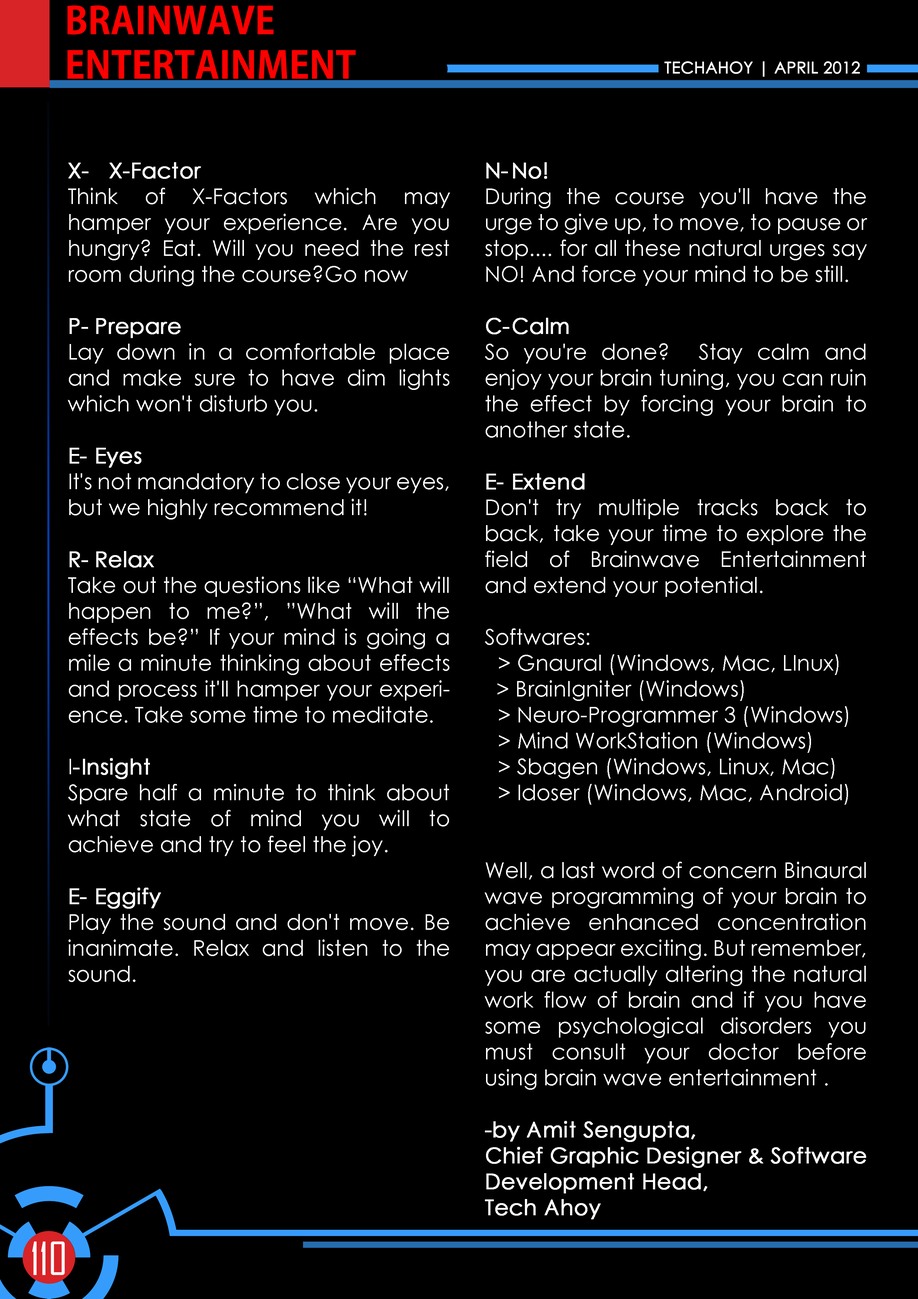
<style>
.page{position:relative;width:918px;height:1299px;background:#000000}
.page>*{position:absolute;margin:0}
.t1{font:37px "AdobeGothicStd-Bold";color:#ff0000;text-transform:uppercase}
.t2{font:16px "CenturyGothic";color:#ffffff;text-transform:uppercase;font-weight:bold}
.t3{font:21.6px "CenturyGothic";color:#fdfdfd}
.t4{font:21.6px "CenturyGothic";color:#fdfdfd;font-weight:bold}
.t5{font:43.7px "AgencyFB-Reg";color:#ffffff;text-transform:uppercase}
</style>
<div class="page">
<p class="t1" style="left:67px;top:5px;width:289px;height:74px">BRAINWAVE <br>eNTERTAINMENT</p>
<p class="t2" style="left:665px;top:61px;width:195px;height:16px">techahoy | APRIL 2012</p>
<p class="t3" style="left:68px;top:162px;width:382px;height:820px;text-align:justify"><span class="t4">X-   X-Factor<br></span>Think of X-Factors which may hamper your experience. Are you hungry? Eat. Will you need the rest room during the course?Go now<br><br><span class="t4">P- Prepare<br></span>Lay down in a comfortable place and make sure to have dim lights which won't disturb you.<br><br><span class="t4">E- Eyes<br></span>It's not mandatory to close your eyes, but we highly recommend it!<br><br><span class="t4">R- Relax<br></span>Take out the questions like “What will happen to me?”, ”What will the effects be?” If your mind is going a mile a minute thinking about effects and process it'll hamper your experience. Take some time to meditate.  <br><br>I<span class="t4">- Insight<br></span>Spare half a minute to think about what state of mind you will to achieve and try to feel the joy.<br><br><span class="t4">E- Eggify<br></span>Play the sound and don't move. Be inanimate. Relax and listen to the sound.</p>
<p class="t3" style="left:485px;top:162px;width:382px;height:1057px;text-align:justify"><span class="t4">N- No!<br></span>During the course you'll have the urge to give up, to move, to pause or stop.... for all these natural urges say NO! And force your mind to be still.<br><br><span class="t4">C- Calm<br></span>So you're done?  Stay calm and enjoy your brain tuning, you can ruin the effect by forcing your brain to another state.<br><br><span class="t4">E- Extend<br></span>Don't try multiple tracks back to back, take your time to explore the field of Brainwave Entertainment and extend your potential.<br><br>Softwares:<br>  &gt; Gnaural (Windows, Mac, LInux)<br>  &gt; BrainIgniter (Windows)<br> &gt; Neuro-Programmer 3 (Windows)<br> &gt; Mind WorkStation (Windows)<br> &gt; Sbagen (Windows, Linux, Mac)<br> &gt; Idoser (Windows, Mac, Android)<br><br><br>Well, a last word of concern Binaural wave programming of your brain to achieve enhanced concentration may appear exciting. But remember, you are actually altering the natural work flow of brain and if you have some psychological disorders you must consult your doctor before using brain wave entertainment .<br><br><span class="t4">-by Amit Sengupta,<br>Chief Graphic Designer &amp; Software Development Head,<br>Tech Ahoy</span></p>
<p class="t5" style="left:32px;top:1241px;width:33px;height:34px">110</p>
</div>
